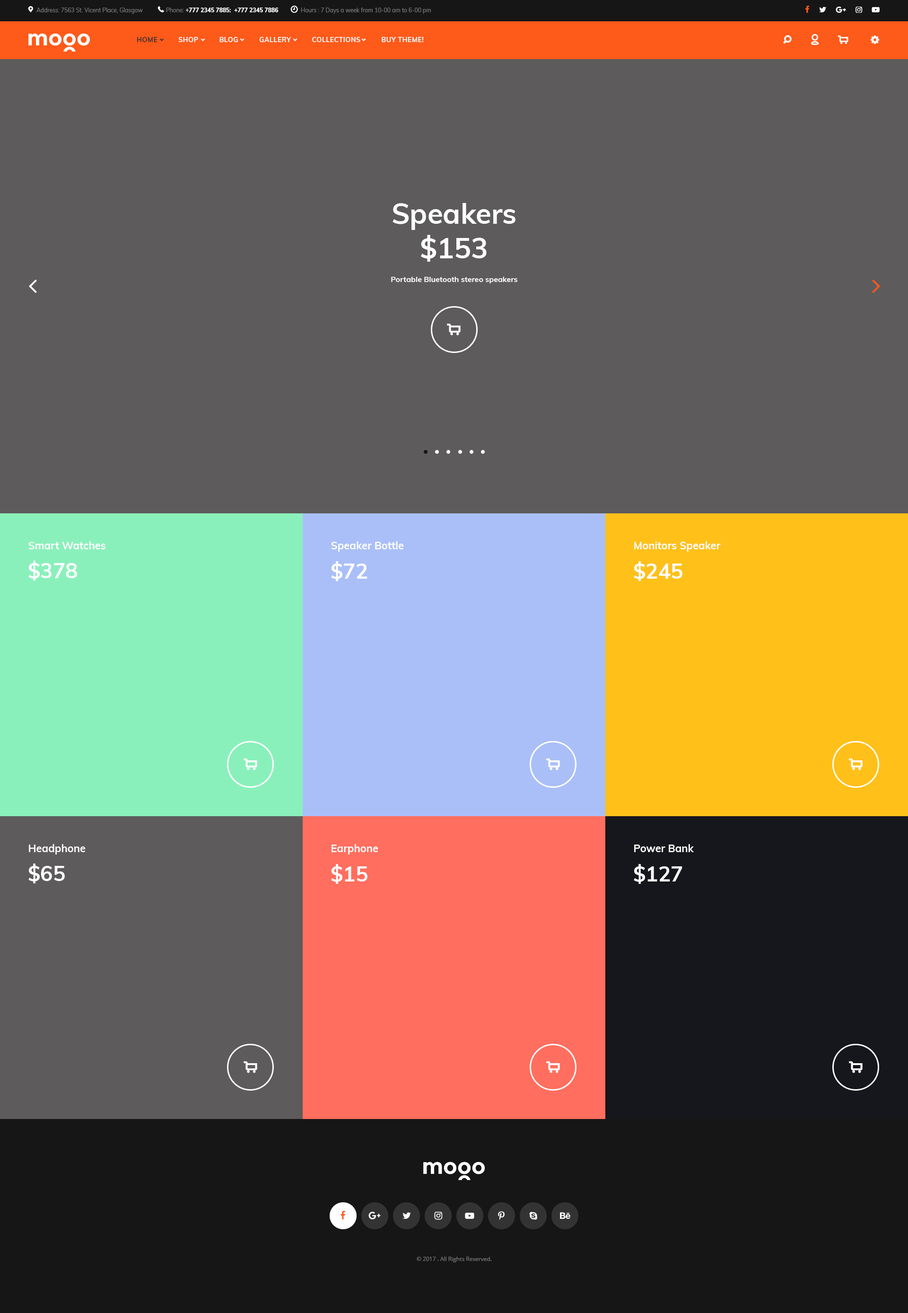
<style>
.page{position:relative;width:908px;height:1313px;background:#5d5b5c}
.page>*{position:absolute;margin:0}
.t1{font:5.7px "Muli-Regular";color:#777777}
.t2{font:5.7px "Muli-ExtraBold";color:#ffffff}
.t3{font:5.7px "Muli-Regular";color:#ffffff}
.t4{font:6.6px "Muli-Bold";letter-spacing:0.04em;color:#ffffff;text-transform:uppercase}
.t5{font:6.6px "Muli-Bold";letter-spacing:0.04em;color:#333333;text-transform:uppercase}
.t6{font:28.4px/34.5px "Muli-Bold";color:#ffffff}
.t7{font:7.6px "Muli-Bold";color:#ffffff}
.t8{font:10.4px "Muli-Bold";color:#ffffff}
.t9{font:20.8px "Muli-Bold";color:#ffffff}
.t10{font:21.8px "Montserrat-Bold";color:#ffffff}
.t11{font:5.7px "OpenSans";color:#777777}
</style>
<div class="page">
<p class="t1" style="left:36px;top:8px;width:107px;height:6px">Address: 7563 St. Vicent Place, Glasgow</p>
<p class="t2" style="left:166px;top:8px;width:113px;height:4px"><span class="t1">Phone: </span><span class="t3">+</span>777 2345 7885:  +777 2345 7886</p>
<p class="t1" style="left:301px;top:8px;width:130px;height:6px">Hours : 7 Days a week from 10-00 am to 6-00 pm</p>
<p class="t4" style="left:137px;top:37px;width:287px;height:5px"><span class="t5">hOME</span>          Shop          bLOG          gALLERY          Collections          BUY THEME!</p>
<p class="t6" style="left:393px;top:203px;width:123px;height:59px;text-align:center">Speakers<br>$153</p>
<p class="t7" style="left:391px;top:277px;width:127px;height:6px">Portable Bluetooth stereo speakers</p>
<p class="t8" style="left:28px;top:541px;width:77px;height:8px">Smart Watches</p>
<p class="t8" style="left:331px;top:541px;width:73px;height:11px">Speaker Bottle</p>
<p class="t8" style="left:634px;top:541px;width:87px;height:11px">Monitors Speaker</p>
<p class="t9" style="left:28px;top:561px;width:49px;height:19px">$378</p>
<p class="t9" style="left:331px;top:561px;width:37px;height:20px">$72</p>
<p class="t9" style="left:634px;top:561px;width:49px;height:20px">$245</p>
<p class="t8" style="left:29px;top:844px;width:57px;height:10px">Headphone</p>
<p class="t8" style="left:332px;top:844px;width:46px;height:10px">Earphone</p>
<p class="t8" style="left:634px;top:844px;width:60px;height:8px">Power Bank</p>
<p class="t9" style="left:28px;top:863px;width:37px;height:20px">$65</p>
<p class="t9" style="left:331px;top:864px;width:37px;height:20px">$15</p>
<p class="t9" style="left:634px;top:864px;width:49px;height:20px">$127</p>
<p class="t10" style="left:423px;top:1161px;width:62px;height:13px">mooo</p>
<p class="t11" style="left:417px;top:1257px;width:75px;height:5px">© 2017 . All Rights Reserved.</p>
</div>
